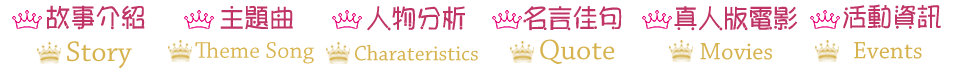
<style>
.page{position:relative;width:960px;height:70px;background:#ffffff}
.page>*{position:absolute;margin:0}
.t1{font:25px "winman-tu2k3do4";color:#bf3465}
.t2{font:30px "ChaparralPro-Regular";color:#d6b34f}
.t3{font:24px "ChaparralPro-Regular";color:#d9b553}
.t4{font:22px "ChaparralPro-Regular";color:#d6b34f}
.t5{font:25px "ChaparralPro-Regular";color:#d6b34f}
</style>
<div class="page">
<p class="t1" style="left:46px;top:5px;width:99px;height:25px">故事介紹</p>
<p class="t1" style="left:220px;top:5px;width:73px;height:25px">主題曲</p>
<p class="t1" style="left:367px;top:6px;width:98px;height:25px">人物分析</p>
<p class="t1" style="left:523px;top:6px;width:99px;height:25px">名言佳句</p>
<p class="t1" style="left:674px;top:6px;width:124px;height:25px">真人版電影</p>
<p class="t1" style="left:843px;top:4px;width:98px;height:25px">活動資訊</p>
<p class="t2" style="left:67px;top:41px;width:65px;height:28px">Story</p>
<p class="t2" style="left:540px;top:39px;width:75px;height:25px">Quote</p>
<p class="t3" style="left:195px;top:42px;width:119px;height:22px">Theme Song</p>
<p class="t4" style="left:355px;top:44px;width:123px;height:17px">Charateristics</p>
<p class="t5" style="left:700px;top:43px;width:72px;height:17px">Movies</p>
<p class="t5" style="left:854px;top:42px;width:68px;height:17px">Events</p>
</div>
